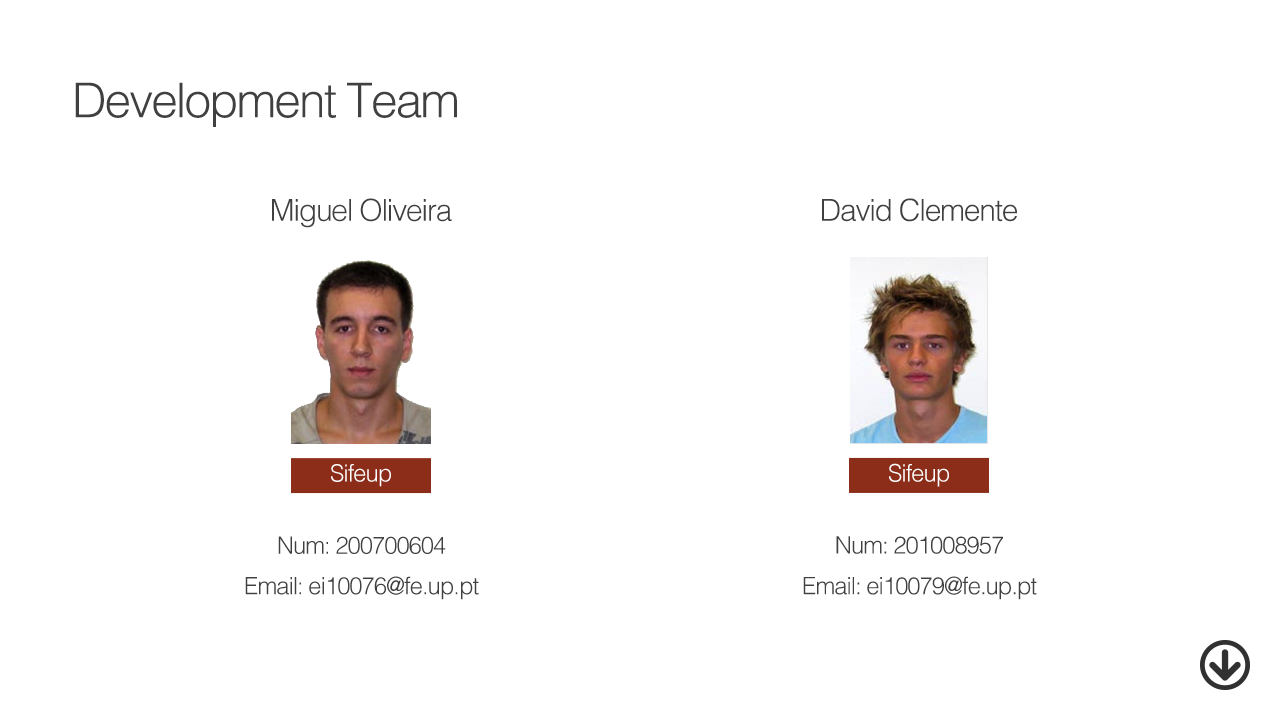
<style>
.page{position:relative;width:1280px;height:720px;background:#ffffff}
.page>*{position:absolute;margin:0}
.t1{font:48px "Helvetica-Light";letter-spacing:-0.04em;color:#404040}
.t2{font:30.3px "Helvetica-Light";letter-spacing:-0.04em;color:#404040}
.t3{font:23.9px "Helvetica-Light";letter-spacing:-0.04em;color:#ffffff}
.t4{font:24px/20.3px "Helvetica-Light";letter-spacing:-0.04em;color:#404040}
</style>
<div class="page">
<p class="t1" style="left:75px;top:82px;width:382px;height:45px">Development Team</p>
<p class="t2" style="left:272px;top:198px;width:180px;height:30px">Miguel Oliveira</p>
<p class="t2" style="left:822px;top:198px;width:195px;height:24px">David Clemente</p>
<p class="t3" style="left:331px;top:464px;width:60px;height:23px">Sifeup</p>
<p class="t3" style="left:889px;top:463px;width:60px;height:24px">Sifeup</p>
<p class="t4" style="left:245px;top:536px;width:234px;height:64px;text-align:center">Num: 200700604<br><br>Email: ei10076@fe.up.pt</p>
<p class="t4" style="left:803px;top:536px;width:234px;height:64px;text-align:center">Num: 201008957<br><br>Email: ei10079@fe.up.pt</p>
</div>
